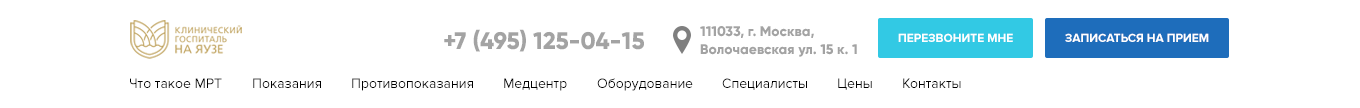
<style>
.page{position:relative;width:1360px;height:108px;background:#ffffff}
.page>*{position:absolute;margin:0}
.t1{font:24px "Gilroy-ExtraBold";color:#a3a3a3}
.t2{font:14px/18px "Gilroy-ExtraBold";color:#a3a3a3}
.t3{font:12px "ProximaNova-Bold";color:#ffffff;text-transform:uppercase}
.t4{font:14px "ProximaNova-Regular";color:#000000}
</style>
<div class="page">
<p class="t1" style="left:444px;top:29px;width:200px;height:23px">+7 (495) 125-04-15</p>
<p class="t2" style="left:700px;top:26px;width:157px;height:31px">111033, г. Москва,<br>Волочаевская ул. 15 к. 1</p>
<p class="t3" style="left:898px;top:33px;width:115px;height:9px">перезвоните мне</p>
<p class="t3" style="left:1065px;top:33px;width:144px;height:9px">Записаться на прием</p>
<p class="t4" style="left:130px;top:78px;width:92px;height:10px">Что такое МРТ</p>
<p class="t4" style="left:253px;top:78px;width:68px;height:10px">Показания</p>
<p class="t4" style="left:352px;top:78px;width:121px;height:13px">Противопоказания</p>
<p class="t4" style="left:504px;top:78px;width:63px;height:13px">Медцентр</p>
<p class="t4" style="left:597px;top:78px;width:96px;height:13px">Оборудование</p>
<p class="t4" style="left:722px;top:78px;width:85px;height:12px">Специалисты</p>
<p class="t4" style="left:838px;top:78px;width:34px;height:12px">Цены</p>
<p class="t4" style="left:903px;top:78px;width:58px;height:10px">Контакты</p>
</div>
